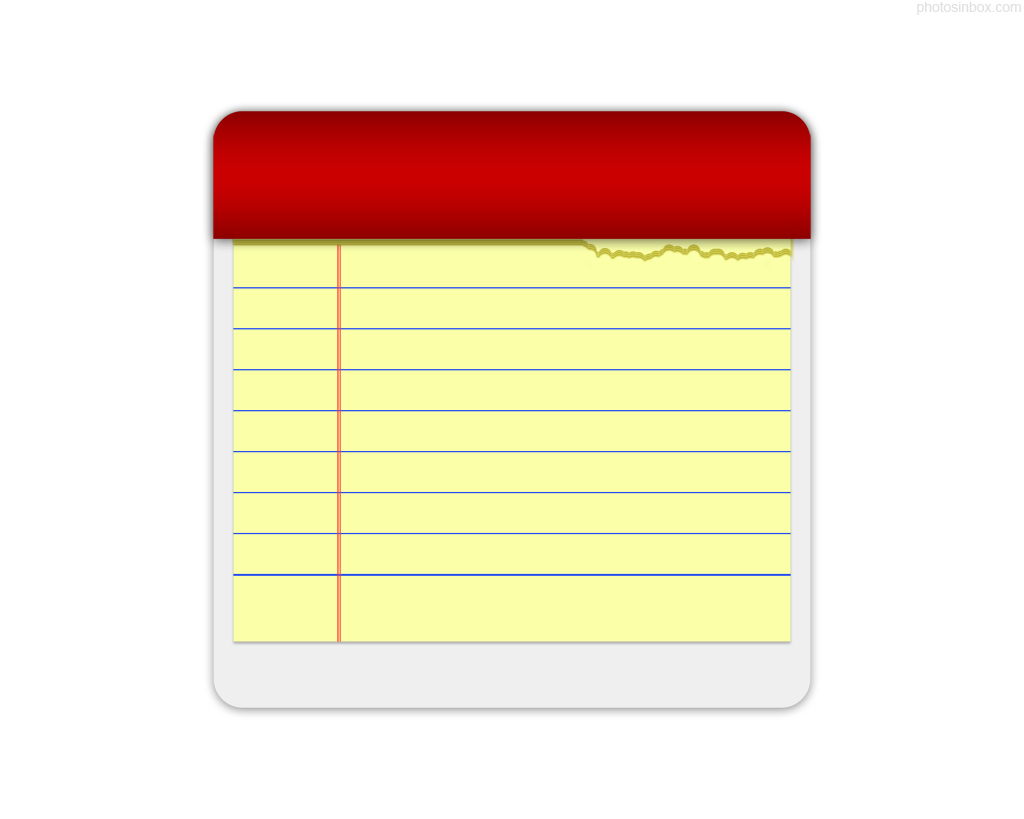
<style>
.page{position:relative;width:1024px;height:819px;background:#ffffff}
.page>*{position:absolute;margin:0}
.t1{font:14.2px "ArialMT";letter-spacing:-0.01em;color:#e1e1e1}
</style>
<div class="page">
<p class="t1" style="left:917px;top:1px;width:104px;height:14px">photosinbox.com</p>
</div>
